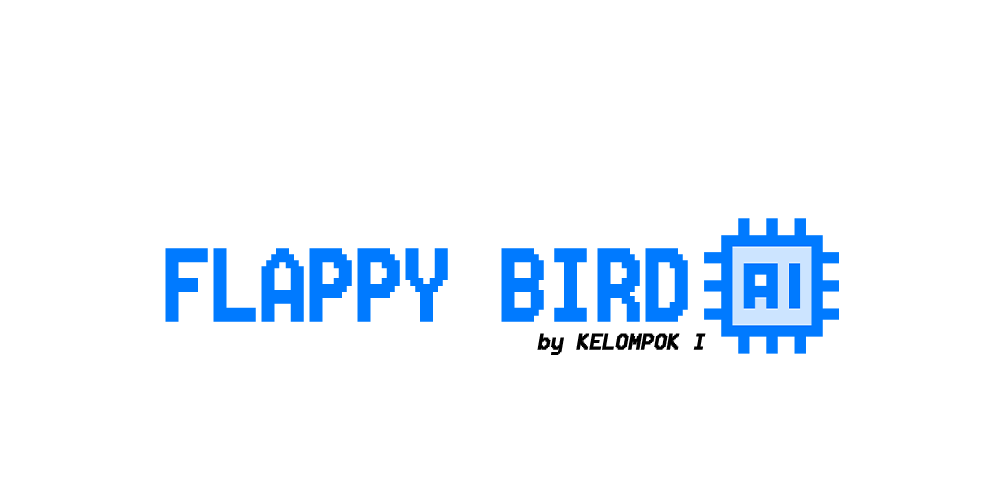
<style>
.page{position:relative;width:1000px;height:500px;background:#ffffff}
.page>*{position:absolute;margin:0}
.t1{font:127px "8514oem";letter-spacing:-0.01em;color:#007aff;font-weight:bold;scale:0.82 1}
.t2{font:28px "8514oem";letter-spacing:-0.01em;color:#010101;font-weight:bold;font-style:italic}
</style>
<div class="page">
<p class="t1" style="left:165px;top:248px;width:523px;height:74px">FLAPPY BIRD</p>
<p class="t2" style="left:537px;top:333px;width:169px;height:22px">by KELOMPOK I</p>
</div>
